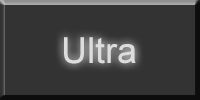
<style>
.page{position:relative;width:200px;height:100px;background:#333333}
.page>*{position:absolute;margin:0}
.t1{font:36px "ArialMT";color:#dddddd}
</style>
<div class="page">
<p class="t1" style="left:64px;top:37px;width:72px;height:27px">Ultra</p>
</div>
